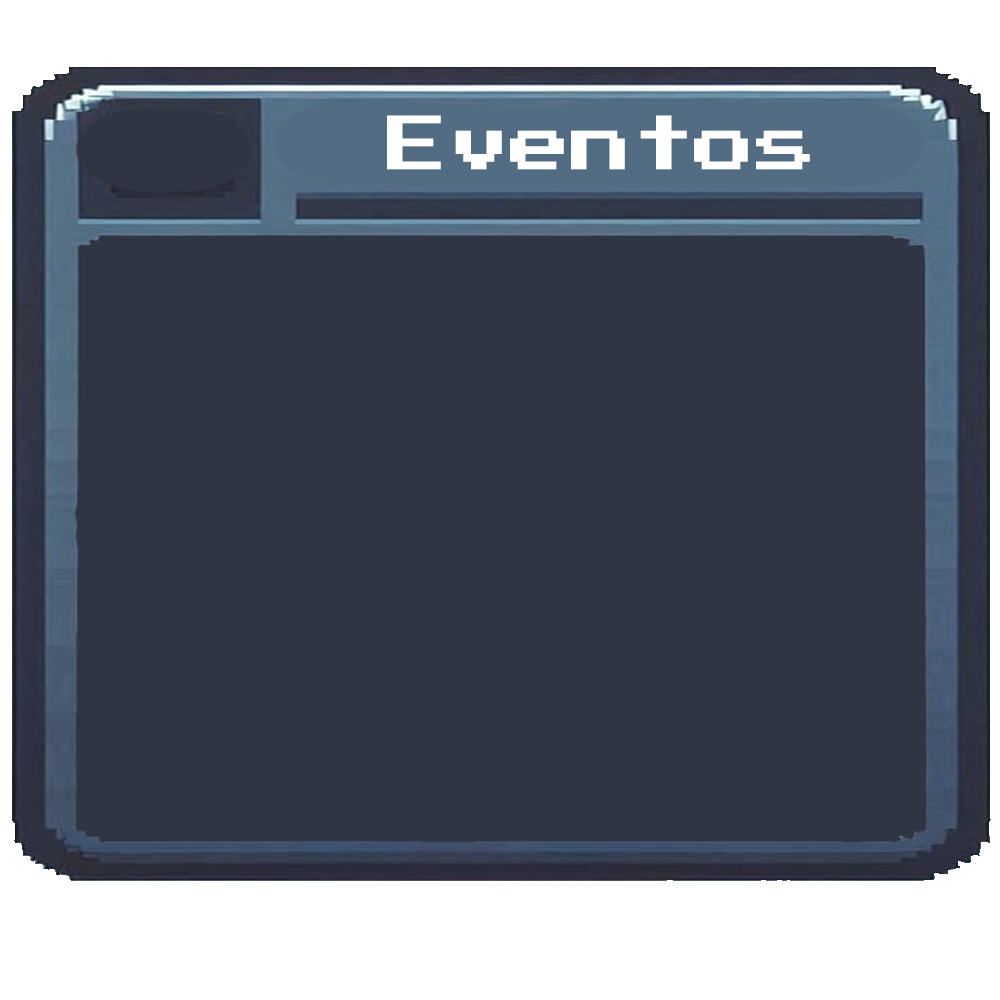
<style>
.page{position:relative;width:1000px;height:1000px;background:#303543}
.page>*{position:absolute;margin:0}
.t1{font:61.5px "PressStart2P";color:#ffffff}
</style>
<div class="page">
<p class="t1" style="left:387px;top:115px;width:423px;height:55px">Eventos</p>
</div>
